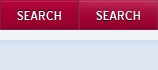
<style>
.page{position:relative;width:158px;height:70px;background:#dce5f1}
.page>*{position:absolute;margin:0}
.t1{font:16px "BlueHighway";letter-spacing:0.025em;color:#ffffff}
</style>
<div class="page">
<p class="t1" style="left:17px;top:11px;width:44px;height:9px">SEARCH</p>
<p class="t1" style="left:96px;top:11px;width:44px;height:9px">SEARCH</p>
</div>
